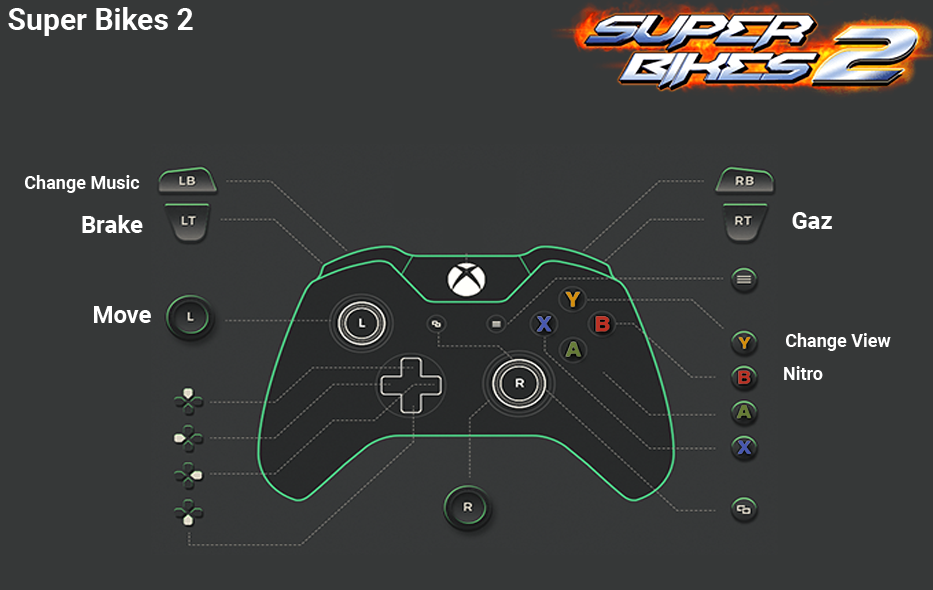
<style>
.page{position:relative;width:933px;height:590px;background:#363838}
.page>*{position:absolute;margin:0}
.t1{font:30px "Roboto-Bold";color:#ffffff}
.t2{font:18px "Roboto-Bold";color:#ffffff}
.t3{font:24px "Roboto-Bold";color:#ffffff}
</style>
<div class="page">
<p class="t1" style="left:8px;top:7px;width:185px;height:29px">Super Bikes 2</p>
<p class="t2" style="left:25px;top:175px;width:115px;height:18px">Change Music</p>
<p class="t3" style="left:82px;top:215px;width:61px;height:18px">Brake</p>
<p class="t3" style="left:792px;top:212px;width:40px;height:17px">Gaz</p>
<p class="t3" style="left:94px;top:306px;width:57px;height:17px">Move</p>
<p class="t2" style="left:786px;top:333px;width:105px;height:18px">Change View</p>
<p class="t2" style="left:784px;top:366px;width:39px;height:14px">Nitro</p>
</div>
